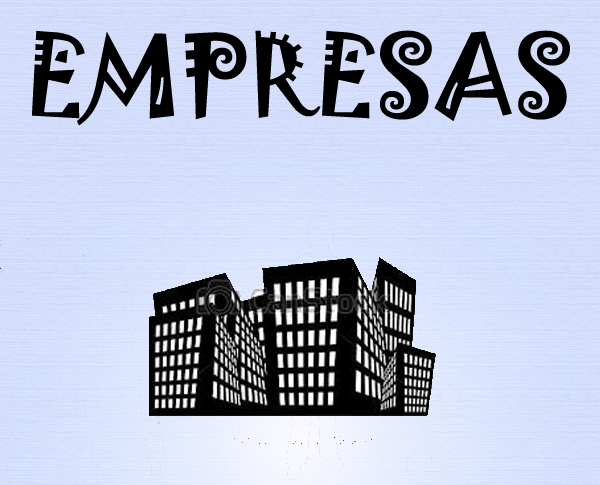
<style>
.page{position:relative;width:600px;height:485px}
.page>*{position:absolute;margin:0}
.t1{font:100px "Jokerman-Regular";color:#000001}
</style>
<div class="page">
<p class="t1" style="left:32px;top:30px;width:538px;height:96px">EMPRESAS</p>
</div>
